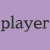
<style>
.page{position:relative;width:50px;height:50px;background:#b498c3}
.page>*{position:absolute;margin:0}
.t1{font:16px "SawarabiMincho-Medium";color:#323433}
</style>
<div class="page">
<p class="t1" style="left:0px;top:15px;width:50px;height:17px">player</p>
</div>
